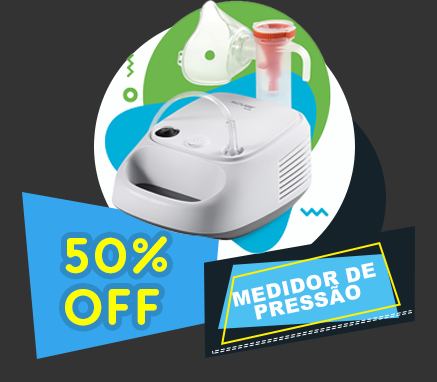
<style>
.page{position:relative;width:437px;height:382px;background:#333333}
.page>*{position:absolute;margin:0}
.t1{font:53px/52px "HankRnd-Black";letter-spacing:0.03em;color:#fdff00}
.t2{font:20px/18px "Arial-Black";letter-spacing:0.03em;color:#fdffff}
</style>
<div class="page">
<p class="t1" style="left:65px;top:236px;width:102px;height:90px">50%<br>OFF</p>
<p class="t2" style="left:232px;top:262px;width:144px;height:58px;text-align:center;rotate:-12deg">MEDIDOR DE<br>PRESSÃO</p>
</div>
